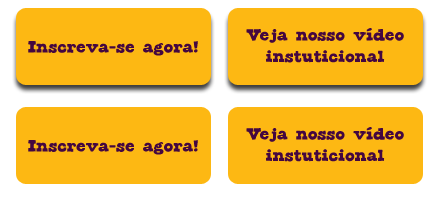
<style>
.page{position:relative;width:437px;height:199px;background:#fdb813}
.page>*{position:absolute;margin:0}
.t1{font:18px "CornDog";color:#440740}
</style>
<div class="page">
<p class="t1" style="left:246px;top:28px;width:158px;height:35px;text-align:center">Veja nosso vídeo instuticional</p>
<p class="t1" style="left:28px;top:41px;width:170px;height:15px">Inscreva-se agora!</p>
<p class="t1" style="left:246px;top:127px;width:158px;height:35px;text-align:center">Veja nosso vídeo instuticional</p>
<p class="t1" style="left:28px;top:140px;width:170px;height:15px">Inscreva-se agora!</p>
</div>
